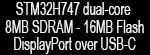
<style>
.page{position:relative;width:150px;height:55px;background:#000000}
.page>*{position:absolute;margin:0}
.t1{font:18px/17.5px "ArialNarrow";color:#f4f4f4;scale:0.77 1}
</style>
<div class="page">
<p class="t1" style="left:5px;top:2px;width:139px;height:52px;text-align:center">STM32H747 dual-core <br>8MB SDRAM - 16MB Flash<br>DisplayPort over USB-C</p>
</div>
